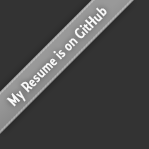
<style>
.page{position:relative;width:149px;height:149px;background:#333333}
.page>*{position:absolute;margin:0}
.t1{font:16px "Collegiate";color:#ffffff}
</style>
<div class="page">
<p class="t1" style="left:6px;top:7px;width:101px;height:100px;rotate:-45deg">My Resume is on GitHub</p>
</div>
